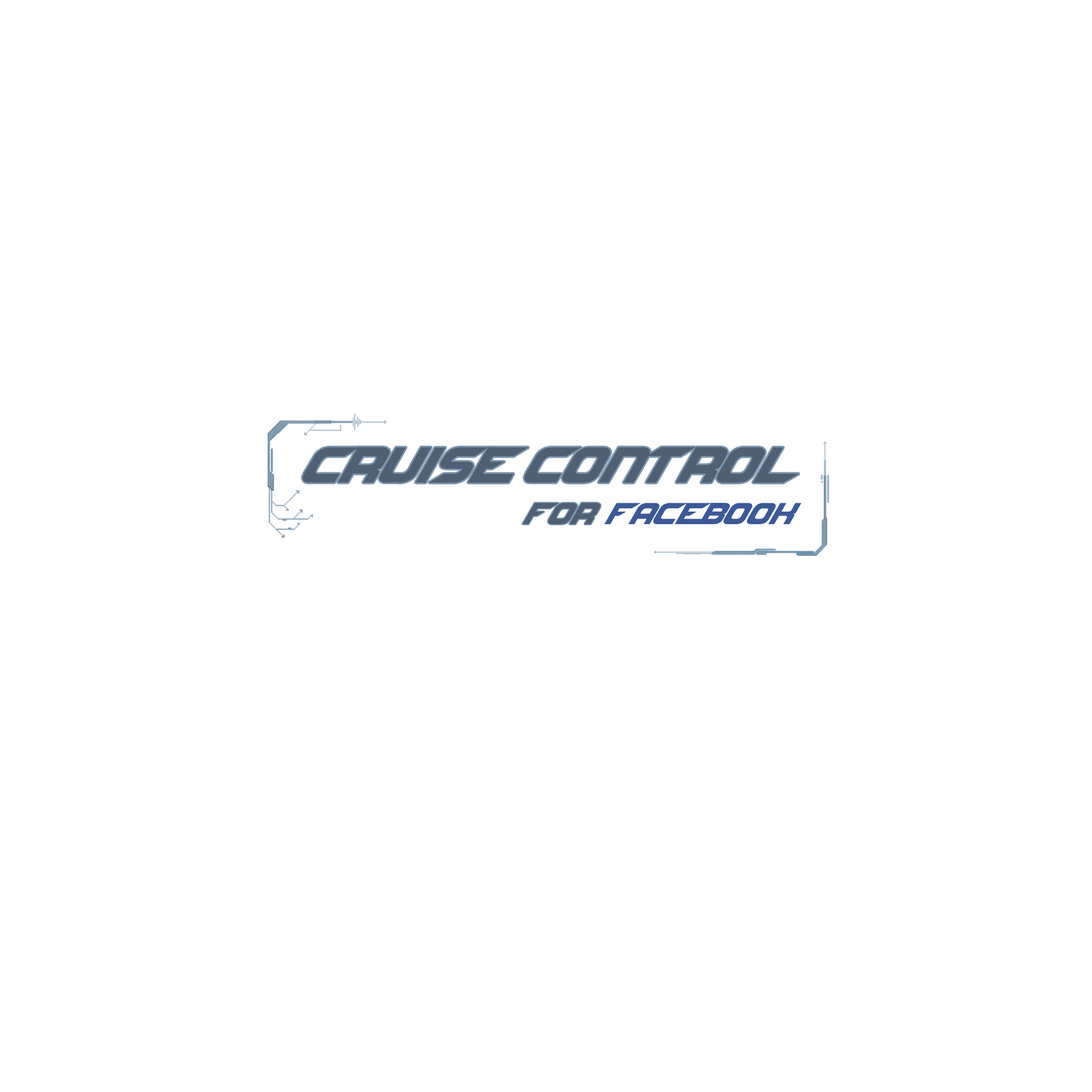
<style>
.page{position:relative;width:1092px;height:1092px;background:#ffffff}
.page>*{position:absolute;margin:0}
.t1{font:54.6px "NFSfont";color:#4f6075}
.t2{font:32.8px "NFSfont";color:#4f6075}
.t3{font:32.8px "NFSfont";color:#3b5998}
</style>
<div class="page">
<p class="t1" style="left:302px;top:447px;width:497px;height:36px">Cruise Control</p>
<p class="t2" style="left:523px;top:503px;width:78px;height:21px">For</p>
<p class="t3" style="left:604px;top:503px;width:198px;height:21px">Facebook</p>
</div>
